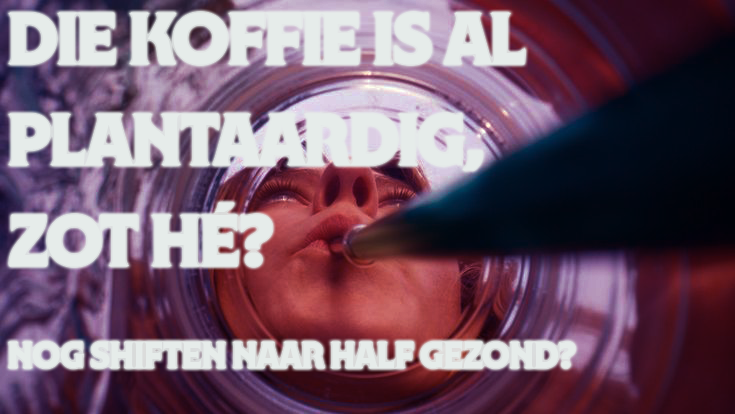
<style>
.page{position:relative;width:735px;height:414px}
.page>*{position:absolute;margin:0}
.t1{font:60px/101.1px "NYBotanicalGothic-Extrabold";letter-spacing:-0.02em;color:#e6ecea;scale:1.04 1}
.t2{font:30px/101.1px "NYBotanicalGothic-Extrabold";letter-spacing:-0.02em;color:#e6ecea;scale:1.04 1}
</style>
<div class="page">
<p class="t1" style="left:8px;top:12px;width:567px;height:357px">DIE KOFFIE IS AL PLANTAARDIG, <br>ZOT HÉ?<br><span class="t2">NOG SHIFTEN NAAR HALF GEZOND?</span></p>
</div>
